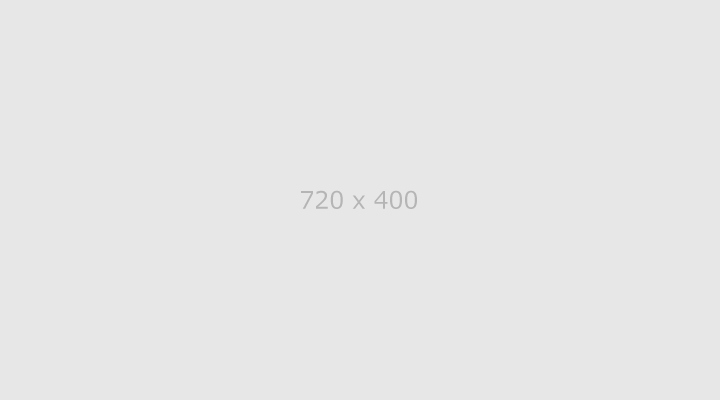
<style>
.page{position:relative;width:720px;height:400px;background:#e7e7e7}
.page>*{position:absolute;margin:0}
.t1{font:24px "Meiryo";color:#b5b5b5}
</style>
<div class="page">
<p class="t1" style="left:301px;top:190px;width:116px;height:19px">720 x 400</p>
</div>
